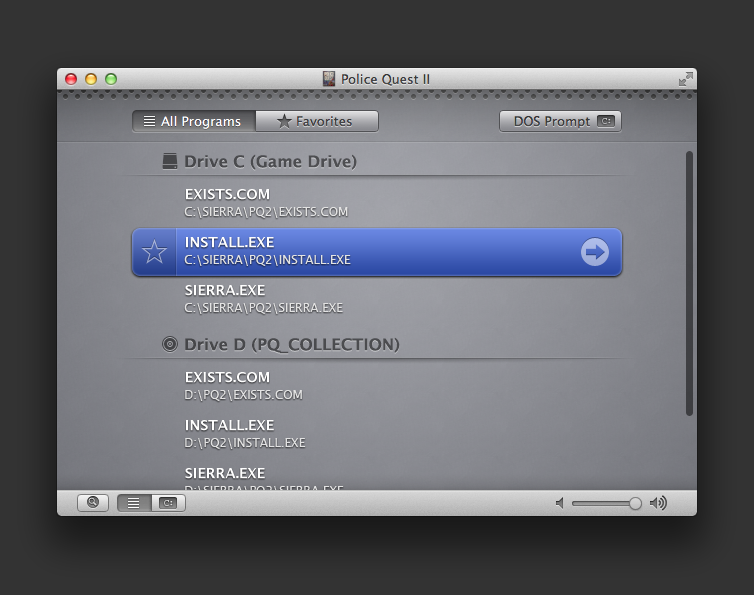
<style>
.page{position:relative;width:754px;height:595px}
.page>*{position:absolute;margin:0}
.t1{font:16px "LucidaGrande-Bold";color:#4c4c50}
.t2{font:14px "LucidaGrande-Bold";color:#fefefe}
.t3{font:12px "LucidaGrande";color:#e3e3e3}
.t4{font:16px "LucidaGrande-Bold";color:#4a4b4e}
</style>
<div class="page">
<p class="t1" style="left:185px;top:154px;width:172px;height:16px">Drive C (Game Drive)</p>
<p class="t2" style="left:186px;top:189px;width:83px;height:11px">EXISTS.COM</p>
<p class="t3" style="left:184px;top:207px;width:164px;height:11px">C:\SIERRA\PQ2\EXISTS.COM</p>
<p class="t2" style="left:186px;top:237px;width:88px;height:11px">INSTALL.EXE</p>
<p class="t3" style="left:184px;top:255px;width:167px;height:11px">C:\SIERRA\PQ2\INSTALL.EXE</p>
<p class="t2" style="left:185px;top:285px;width:80px;height:11px">SIERRA.EXE</p>
<p class="t3" style="left:184px;top:303px;width:159px;height:11px">C:\SIERRA\PQ2\SIERRA.EXE</p>
<p class="t4" style="left:185px;top:337px;width:215px;height:17px">Drive D (PQ_COLLECTION)</p>
<p class="t2" style="left:186px;top:372px;width:83px;height:11px">EXISTS.COM</p>
<p class="t3" style="left:185px;top:390px;width:117px;height:11px">D:\PQ2\EXISTS.COM</p>
<p class="t2" style="left:186px;top:420px;width:88px;height:11px">INSTALL.EXE</p>
<p class="t3" style="left:185px;top:438px;width:121px;height:11px">D:\PQ2\INSTALL.EXE</p>
<p class="t2" style="left:185px;top:468px;width:80px;height:11px">SIERRA.EXE</p>
</div>
